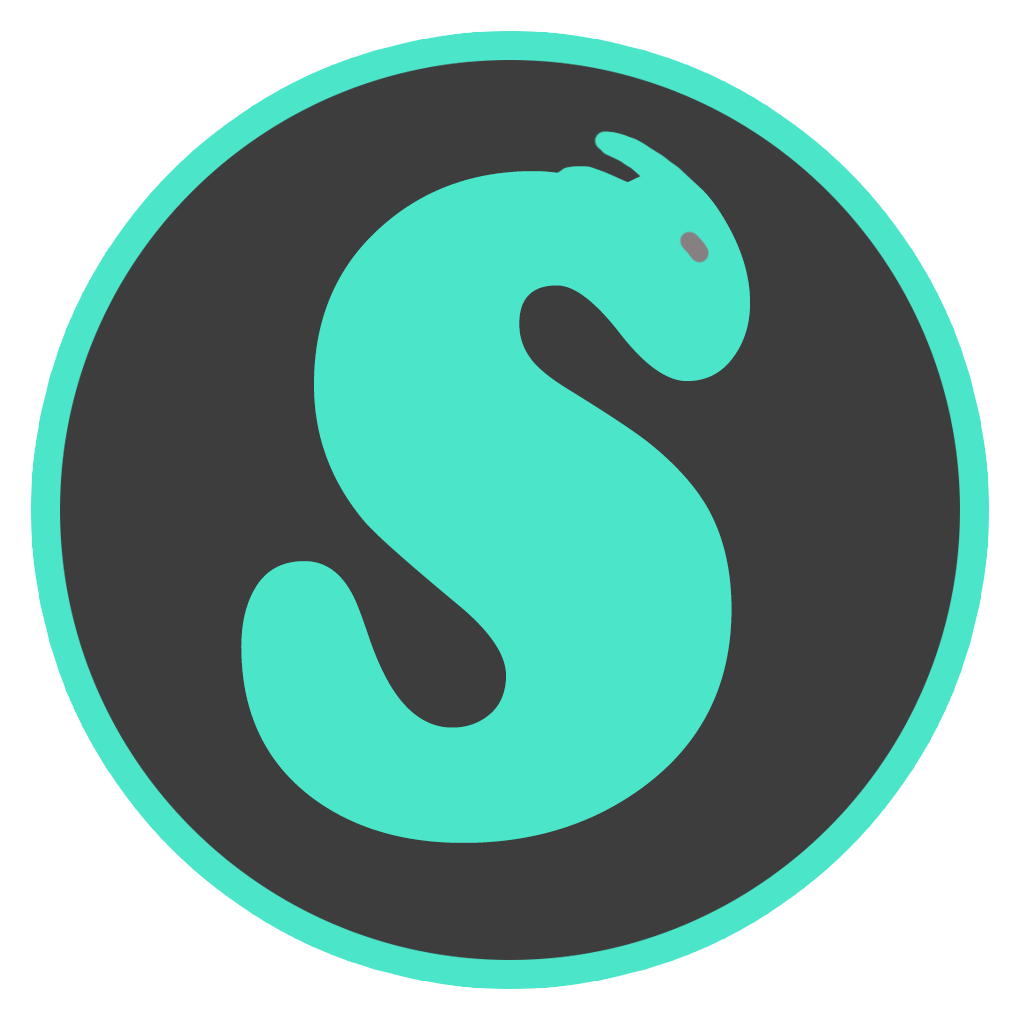
<style>
.page{position:relative;width:1024px;height:1024px;background:#3d3d3d}
.page>*{position:absolute;margin:0}
.t1{font:920px "Cooper-Italic";letter-spacing:0.06em;color:#4be5ca;text-transform:uppercase;scale:0.88 1}
</style>
<div class="page">
<p class="t1" style="left:241px;top:171px;width:509px;height:672px">s</p>
</div>
